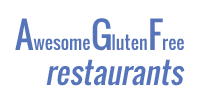
<style>
.page{position:relative;width:200px;height:100px;background:#ffffff}
.page>*{position:absolute;margin:0}
.t1{font:18px "Oswald-Regular";color:#5674b9}
.t2{font:36px "Oswald-Regular";color:#5674b9}
.t3{font:30px "Oswald-Regular";color:#5674b9;font-style:italic}
</style>
<div class="page">
<p class="t1" style="left:15px;top:18px;width:169px;height:33px"><span class="t2">A</span>wesome<span class="t2">G</span>luten<span class="t2">F</span>ree</p>
<p class="t3" style="left:46px;top:59px;width:139px;height:27px">restaurants</p>
</div>
